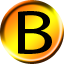
<style>
.page{position:relative;width:64px;height:64px}
.page>*{position:absolute;margin:0}
.t1{font:64.3px "MyriadPro-Regular";color:#000000;scale:1.25 1}
</style>
<div class="page">
<p class="t1" style="left:18px;top:11px;width:34px;height:43px">B</p>
</div>
